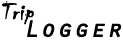
<style>
.page{position:relative;width:123px;height:40px;background:#ffffff}
.page>*{position:absolute;margin:0}
.t1{font:23.6px "Chiller-Regular";letter-spacing:0.01em;color:#000000;font-weight:bold;font-style:italic;scale:1.1 1}
.t2{font:23.6px "OratorStd";letter-spacing:0.01em;color:#000000;font-weight:bold;font-style:italic;scale:1.1 1}
</style>
<div class="page">
<p class="t1" style="left:2px;top:1px;width:32px;height:24px">Trip</p>
<p class="t2" style="left:27px;top:20px;width:94px;height:18px">Logger</p>
</div>
